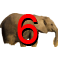
<style>
.page{position:relative;width:58px;height:59px;background:#ffffff}
.page>*{position:absolute;margin:0}
.t1{font:41.7px "ArialMT";color:#ff0101}
.t2{font:41.7px "ArialMT"}
</style>
<div class="page">
<p class="t1" style="left:17px;top:14px;width:21px;height:30px">6</p>
<p class="t2" style="left:18px;top:16px;width:21px;height:30px">6</p>
</div>
